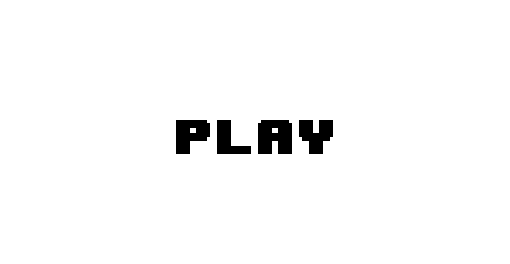
<style>
.page{position:relative;width:510px;height:264px;background:#ffffff}
.page>*{position:absolute;margin:0}
.t1{font:40px "8BITWONDERNominal";color:#000000;text-transform:uppercase;font-weight:bold}
</style>
<div class="page">
<p class="t1" style="left:176px;top:120px;width:157px;height:34px">Play</p>
</div>
